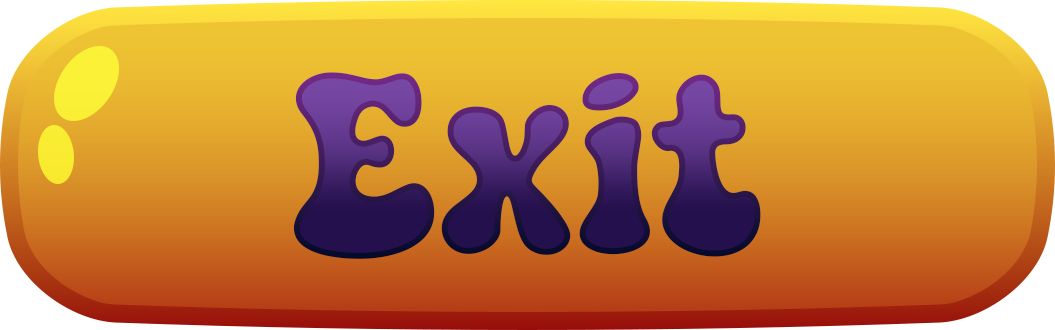
<style>
.page{position:relative;width:1055px;height:330px}
.page>*{position:absolute;margin:0}
.t1{font:266px "SuperNugget-Regular"}
</style>
<div class="page">
<p class="t1" style="left:293px;top:72px;width:468px;height:187px">Exit</p>
</div>
